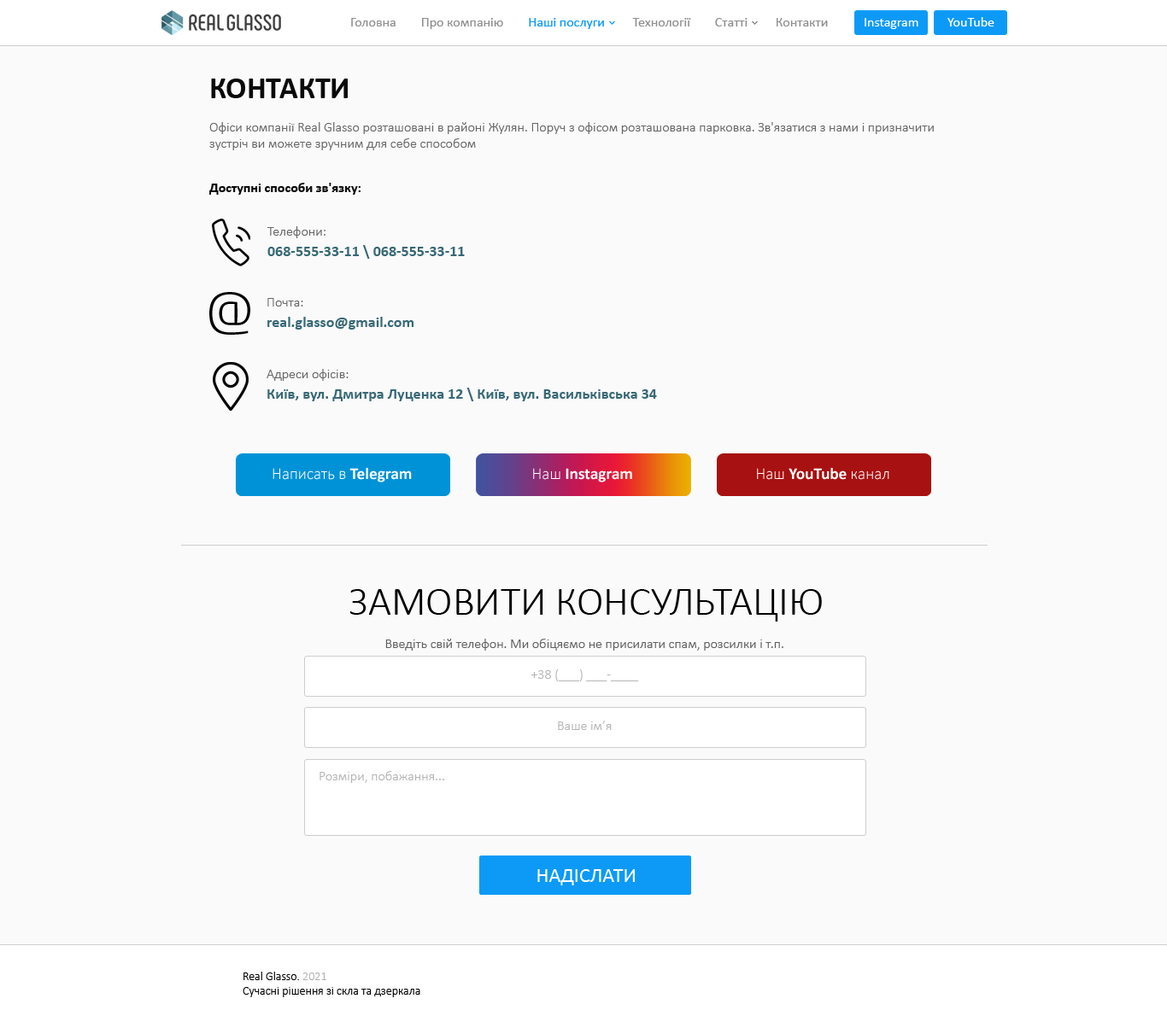
<style>
.page{position:relative;width:1167px;height:1022px;background:#fafafa}
.page>*{position:absolute;margin:0}
.t1{font:13.7px "Calibri";color:#909090}
.t2{font:13.7px "Calibri";color:#0c9af6}
.t3{font:13.7px "Calibri";color:#ffffff}
.t4{font:13.7px "Calibri-Light";color:#676767}
.t5{font:30.7px "Calibri-Bold";color:#0a0a0a}
.t6{font:13.7px "Calibri-Bold";color:#0a0a0a}
.t7{font:15.4px/20.5px "Calibri-Bold";color:#386976}
.t8{font:13.7px/20.5px "Calibri-Light";color:#676767}
.t9{font:58.1px "Springsteel-Light";color:#000000}
.t10{font:16.4px "Calibri-Light";color:#ffffff}
.t11{font:16.4px "Calibri-Bold";color:#ffffff}
.t12{font:41px "Calibri-Light";color:#000000}
.t13{font:13.7px "Calibri-Light";color:#606060}
.t14{font:13.7px "Calibri-Light";color:#b5b5b5}
.t15{font:20.5px "Calibri";color:#ffffff}
.t16{font:12px "Calibri-Light";color:#000000}
.t17{font:12px "Calibri-Light";color:#b0b0b0}
</style>
<div class="page">
<p class="t1" style="left:351px;top:18px;width:477px;height:11px">Головна        Про компанію        <span class="t2">Наші послуги</span>         Технології        Статті         Контакти</p>
<p class="t3" style="left:864px;top:18px;width:54px;height:11px">Instagram</p>
<p class="t3" style="left:947px;top:17px;width:47px;height:9px">YouTube</p>
<p class="t4" style="left:209px;top:79px;width:724px;height:71px"><span class="t5">КОНТАКТИ<br></span><br>Офіси компанії Real Glasso розташовані в районі Жулян. Поруч з офісом розташована парковка. Зв'язатися з нами і призначити зустріч ви можете зручним для себе способом</p>
<p class="t6" style="left:209px;top:183px;width:151px;height:12px">Доступні способи зв'язку:</p>
<p class="t7" style="left:267px;top:226px;width:198px;height:33px"><span class="t8">Телефони:<br></span>068-555-33-11 \ 068-555-33-11</p>
<p class="t9" style="left:209px;top:292px;width:41px;height:43px">@</p>
<p class="t7" style="left:267px;top:298px;width:146px;height:32px"><span class="t8">Почта:<br></span>real.glasso@gmail.com</p>
<p class="t7" style="left:266px;top:369px;width:391px;height:32px"><span class="t8">Адреси офісів:<br></span>Київ, вул. Дмитра Луценка 12 \ Київ, вул. Васильківська 34</p>
<p class="t10" style="left:272px;top:468px;width:140px;height:14px">Написать в<span class="t11"> Telegram</span></p>
<p class="t11" style="left:533px;top:468px;width:99px;height:14px"><span class="t10">Наш</span> Instagram</p>
<p class="t11" style="left:757px;top:468px;width:132px;height:12px"><span class="t10">Наш</span> YouTube <span class="t10">канал</span></p>
<p class="t12" style="left:350px;top:589px;width:472px;height:33px">ЗАМОВИТИ КОНСУЛЬТАЦІЮ</p>
<p class="t13" style="left:385px;top:639px;width:398px;height:12px">Введіть свій телефон. Ми обіцяємо не присилати спам, розсилки і т.п.</p>
<p class="t14" style="left:531px;top:670px;width:108px;height:11px">+38 (___) ___-____</p>
<p class="t14" style="left:558px;top:721px;width:53px;height:9px">Ваше ім’я</p>
<p class="t14" style="left:319px;top:771px;width:125px;height:12px">Розміри, побажання...</p>
<p class="t15" style="left:537px;top:869px;width:98px;height:17px">НАДІСЛАТИ</p>
<p class="t16" style="left:243px;top:972px;width:177px;height:25px">Real Glasso. <span class="t17">2021<br></span>Сучасні рішення зі скла та дзеркала</p>
</div>
